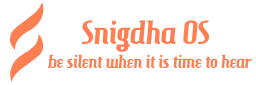
<style>
.page{position:relative;width:256px;height:85px;background:#ffffff}
.page>*{position:absolute;margin:0}
.t1{font:32px "HamburgerHeaven";color:#ff7f53}
.t2{font:18px "HamburgerHeaven";color:#ff7f53}
</style>
<div class="page">
<p class="t1" style="left:81px;top:20px;width:129px;height:32px">Snigdha OS</p>
<p class="t2" style="left:47px;top:54px;width:205px;height:15px">be silent when it is time to hear</p>
</div>
